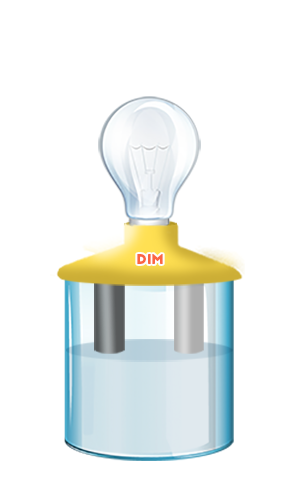
<style>
.page{position:relative;width:300px;height:480px;background:#ffffff}
.page>*{position:absolute;margin:0}
.t1{font:13px "BigJohn";color:#fb6542}
</style>
<div class="page">
<p class="t1" style="left:137px;top:254px;width:26px;height:10px">Dim</p>
</div>
